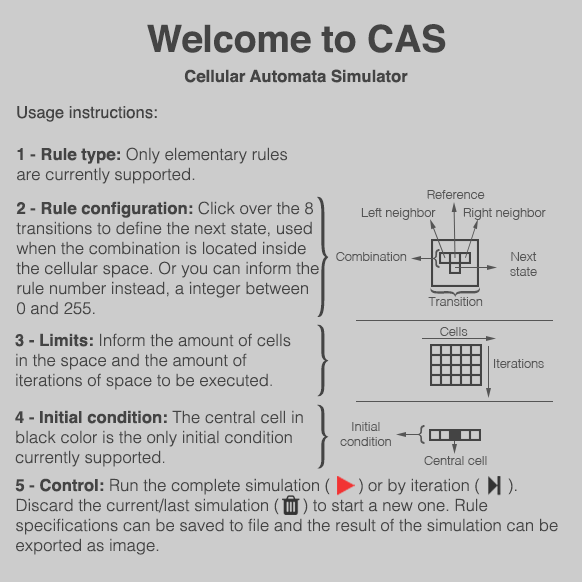
<style>
.page{position:relative;width:582px;height:582px;background:#cccccc}
.page>*{position:absolute;margin:0}
.t1{font:37.5px "Helvetica-Bold";color:#444444}
.t2{font:16.7px "Helvetica-Bold";color:#444444}
.t3{font:16.7px "Helvetica";color:#444444}
.t4{font:16.7px "Helvetica-Light";color:#444444}
.t5{font:129.1px "Helvetica-Light";color:#444444;scale:0.35 1}
.t6{font:12.5px "Helvetica-Light";color:#555555}
.t7{font:20.8px "Helvetica";color:#555555}
.t8{font:53.4px "Helvetica-Light";color:#555555;scale:0.79 1}
.t9{font:76.7px "Helvetica-Light";color:#444444;scale:0.6 1}
.t10{font:68.4px "Helvetica-Light";color:#444444;scale:0.67 1}
</style>
<div class="page">
<p class="t1" style="left:147px;top:24px;width:299px;height:29px">Welcome to CAS</p>
<p class="t2" style="left:184px;top:69px;width:224px;height:14px">Cellular Automata Simulator</p>
<p class="t3" style="left:17px;top:106px;width:140px;height:16px">Usage instructions:</p>
<p class="t4" style="left:17px;top:147px;width:271px;height:37px"><span class="t2">1 - Rule type: </span>Only elementary rules are currently supported.</p>
<p class="t5" style="left:317px;top:196px;width:12px;height:121px">}</p>
<p class="t6" style="left:427px;top:190px;width:58px;height:9px">Reference</p>
<p class="t4" style="left:16px;top:201px;width:303px;height:114px"><span class="t2">2 - Rule configuration: </span>Click over the 8 transitions to define the next state, used when the combination is located inside the cellular space. Or you can inform the rule number instead, a integer between 0 and 255.</p>
<p class="t6" style="left:361px;top:208px;width:75px;height:12px">Left neighbor</p>
<p class="t6" style="left:463px;top:208px;width:83px;height:12px">Right neighbor</p>
<p class="t6" style="left:336px;top:252px;width:71px;height:9px">Combination</p>
<p class="t7" style="left:432px;top:249px;width:8px;height:19px">{</p>
<p class="t6" style="left:510px;top:252px;width:27px;height:24px;text-align:center">Next state</p>
<p class="t8" style="left:430px;top:287px;width:50px;height:10px;rotate:-90deg">{</p>
<p class="t6" style="left:428px;top:297px;width:55px;height:9px">Transition</p>
<p class="t9" style="left:317px;top:324px;width:12px;height:73px">}</p>
<p class="t6" style="left:440px;top:327px;width:28px;height:9px">Cells</p>
<p class="t4" style="left:15px;top:333px;width:276px;height:57px"><span class="t2">3 - Limits: </span>Inform the amount of cells in the space and the amount of <br>iterations of space to be executed.</p>
<p class="t6" style="left:494px;top:359px;width:50px;height:9px">Iterations</p>
<p class="t4" style="left:15px;top:410px;width:288px;height:57px"><span class="t2">4 - Initial condition: </span>The central cell in black color is the only initial condition currently supported.</p>
<p class="t10" style="left:317px;top:404px;width:12px;height:65px">}</p>
<p class="t6" style="left:340px;top:422px;width:51px;height:24px;text-align:center">Initial <br>condition</p>
<p class="t7" style="left:417px;top:425px;width:8px;height:19px">{</p>
<p class="t6" style="left:424px;top:456px;width:63px;height:9px">Central cell</p>
<p class="t4" style="left:15px;top:478px;width:543px;height:77px"><span class="t2">5 - Control: </span>Run the complete simulation (      ) or by iteration (      ). <br>Discard the current/last simulation (     ) to start a new one. Rule <br>specifications can be saved to file and the result of the simulation can be exported as image.</p>
</div>
